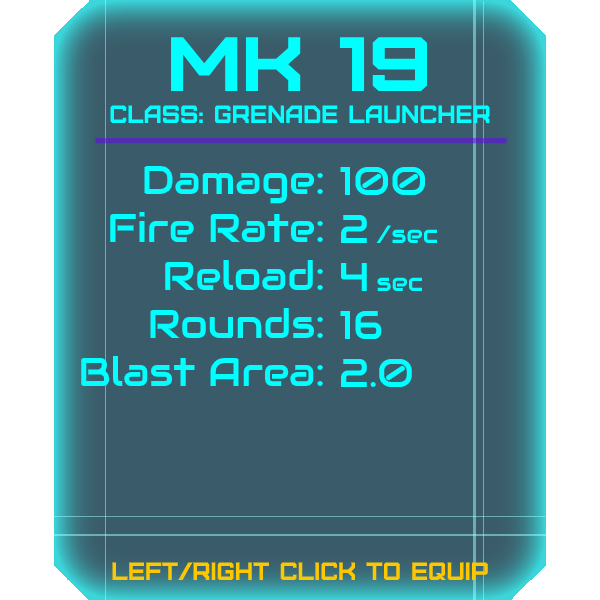
<style>
.page{position:relative;width:600px;height:600px;background:#3a5c6a}
.page>*{position:absolute;margin:0}
.t1{font:76.8px "Furore";color:#00ffff;scale:1.13 1}
.t2{font:25px "Furore";color:#00ffff}
.t3{font:40px "Audiowide-Regular";color:#00ffff}
.t4{font:25px "Audiowide-Regular";color:#00ffff}
.t5{font:25px "Furore";color:#ffc700}
</style>
<div class="page">
<p class="t1" style="left:171px;top:37px;width:256px;height:54px">Mk 19</p>
<p class="t2" style="left:110px;top:105px;width:380px;height:18px">Class: Grenade launcher</p>
<p class="t3" style="left:81px;top:165px;width:242px;height:221px;text-align:right">Damage:<br>Fire Rate:<br>Reload:<br>Rounds:<br>Blast Area:</p>
<p class="t3" style="left:340px;top:166px;width:98px;height:221px">100<br>2 <span class="t4">/sec<br></span>4 <span class="t4">sec<br></span>16<br>2.0</p>
<p class="t5" style="left:112px;top:562px;width:376px;height:18px">left/right click to equip</p>
</div>
